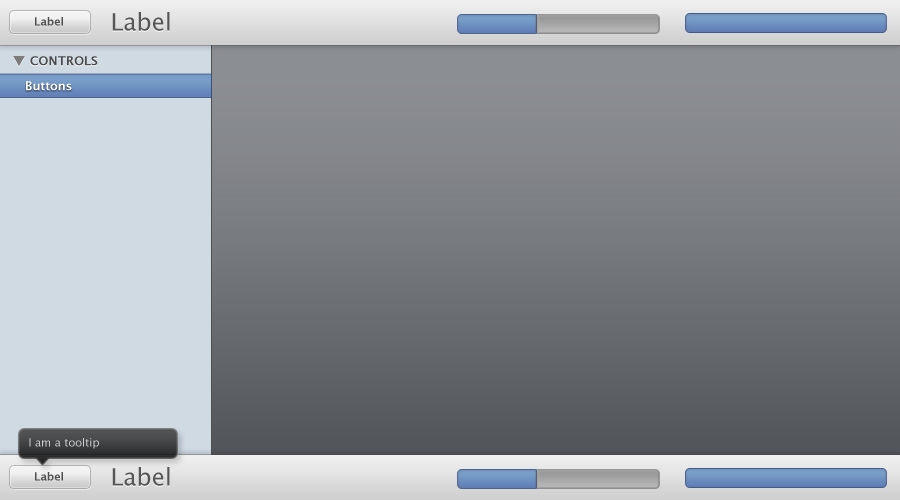
<style>
.page{position:relative;width:900px;height:500px}
.page>*{position:absolute;margin:0}
.t1{font:11px "LucidaGrande-Bold";color:#4a4a4a}
.t2{font:24px "LucidaGrande";color:#565656}
.t3{font:12px "LucidaGrande-Bold";color:#474646}
.t4{font:12px "LucidaGrande-Bold";color:#ffffff}
.t5{font:11px "LucidaGrande";color:#d2d2d2}
</style>
<div class="page">
<p class="t1" style="left:35px;top:17px;width:28px;height:9px">Label</p>
<p class="t2" style="left:112px;top:12px;width:58px;height:19px">Label</p>
<p class="t3" style="left:30px;top:56px;width:68px;height:10px">CONTROLS</p>
<p class="t4" style="left:26px;top:81px;width:46px;height:10px">Buttons</p>
<p class="t5" style="left:29px;top:438px;width:70px;height:11px">I am a tooltip</p>
<p class="t1" style="left:35px;top:472px;width:28px;height:9px">Label</p>
<p class="t2" style="left:112px;top:467px;width:58px;height:19px">Label</p>
</div>
